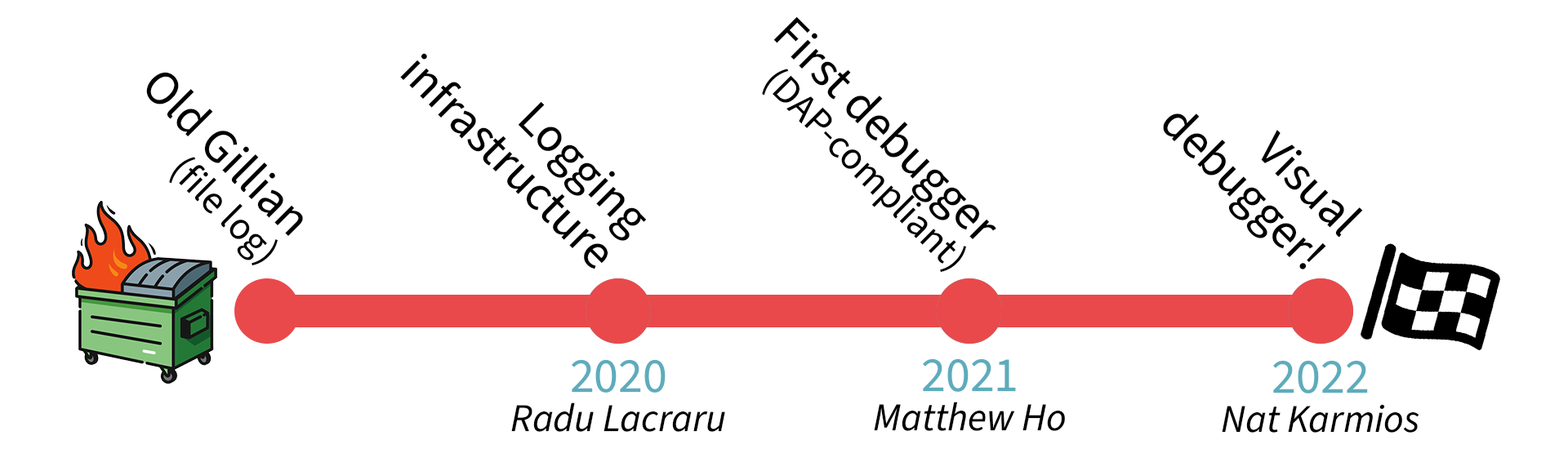
<style>
.page{position:relative;width:1568px;height:449px;background:#ffffff}
.page>*{position:absolute;margin:0}
.t1{font:39.2px/39.2px "SourceSansRoman-Regular";color:#000000}
.t2{font:49px/39.2px "SourceSansRoman-Regular";color:#000000}
.t3{font:49px/49px "SourceSansRoman-Regular";color:#000000}
.t4{font:39.2px/39.2px "SourceSansItalic-Italic";color:#000000}
.t5{font:49px/39.2px "SourceSansRoman-Regular";color:#5dacbc}
</style>
<div class="page">
<p class="t1" style="left:762px;top:16px;width:234px;height:257px;text-align:right;rotate:45deg"><span class="t2">First debugger<br></span>(DAP-compliant)</p>
<p class="t3" style="left:400px;top:53px;width:247px;height:217px;text-align:right;rotate:45deg">Logging<br>infrastructure</p>
<p class="t2" style="left:146px;top:72px;width:157px;height:194px;text-align:right;rotate:45deg">Old Gillian<br><span class="t1">(file log)</span></p>
<p class="t3" style="left:1163px;top:114px;width:200px;height:156px;text-align:right;rotate:45deg">Visual<br>debugger!</p>
<p class="t4" style="left:511px;top:359px;width:214px;height:73px;text-align:center"><span class="t5">2020<br></span>Radu Lacraru</p>
<p class="t4" style="left:874px;top:359px;width:191px;height:72px;text-align:center"><span class="t5">2021<br></span>Matthew Ho</p>
<p class="t4" style="left:1222px;top:360px;width:197px;height:73px;text-align:center"><span class="t5">2022<br></span>Nat Karmios</p>
</div>
